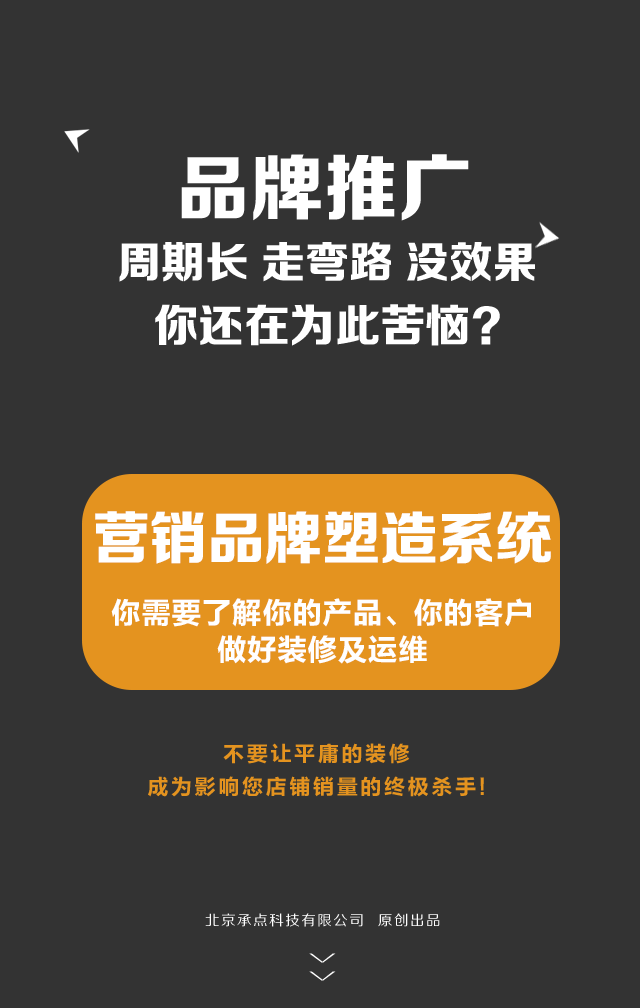
<style>
.page{position:relative;width:640px;height:1008px;background:#333333}
.page>*{position:absolute;margin:0}
.t1{font:72.8px "FZZDHJW--GB1-0";letter-spacing:0.005em;color:#ffffff;text-transform:uppercase}
.t2{font:43.5px "FZZDHJW--GB1-0";color:#ffffff;text-transform:uppercase}
.t3{font:45.2px "FZZDHJW--GB1-0";color:#ffffff;text-transform:uppercase}
.t4{font:57.7px "FZZDHJW--GB1-0";letter-spacing:-0.01em;color:#ffffff;text-transform:uppercase}
.t5{font:30.2px/36.3px "FZLTCHK--GBK1-0";color:#ffffff;text-transform:uppercase}
.t6{font:21.5px/32.2px "FZLTCHK--GBK1-0";letter-spacing:0.1em;color:#e4931f;text-transform:uppercase}
.t7{font:14.2px "FZZHJW--GB1-0";letter-spacing:0.1em;color:#ffffff;text-transform:uppercase}
.t8{font:36.8px "FZZXHJW--GB1-0";letter-spacing:0.5em;color:#ffffff;text-transform:uppercase;scale:0.44 1}
</style>
<div class="page">
<p class="t1" style="left:181px;top:154px;width:288px;height:67px">品牌推广</p>
<p class="t2" style="left:119px;top:242px;width:416px;height:40px">周期长 走弯路 没效果</p>
<p class="t3" style="left:155px;top:304px;width:345px;height:42px">你还在为此苦恼？</p>
<p class="t4" style="left:95px;top:511px;width:456px;height:53px">营销品牌塑造系统</p>
<p class="t5" style="left:111px;top:598px;width:420px;height:66px;text-align:center">你需要了解你的产品、你的客户<br>做好装修及运维</p>
<p class="t6" style="left:148px;top:743px;width:336px;height:54px;text-align:center">不要让平庸的装修<br>成为影响您店铺销量的终极杀手!</p>
<p class="t7" style="left:205px;top:913px;width:235px;height:14px">北京承点科技有限公司  原创出品</p>
<p class="t8" style="left:309px;top:953px;width:27px;height:28px;rotate:90deg">&gt;&gt;</p>
</div>
